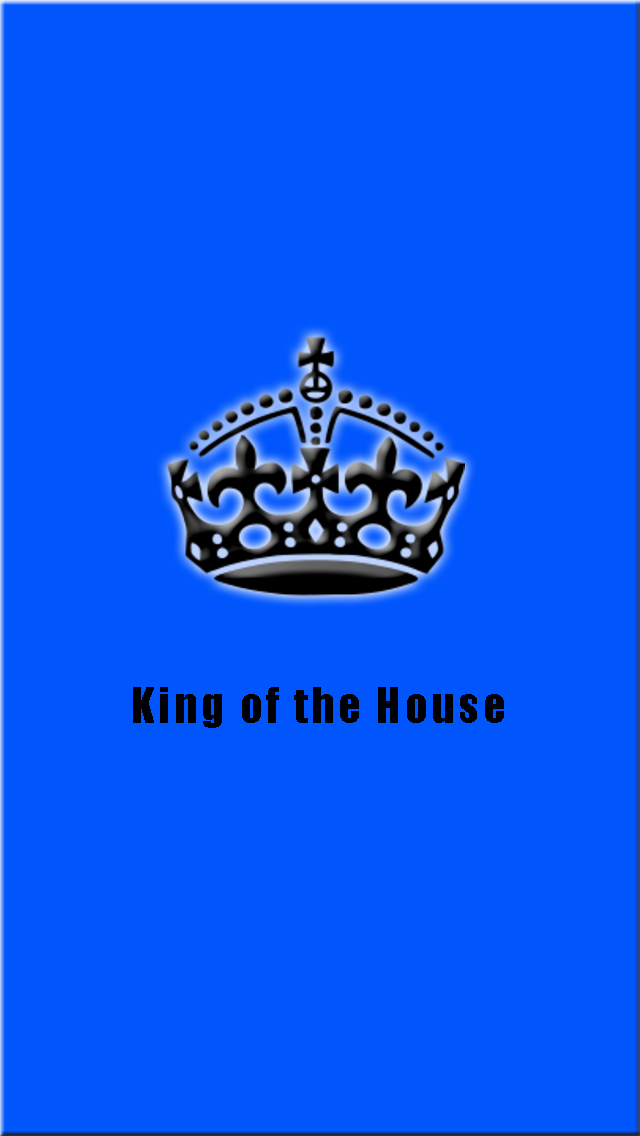
<style>
.page{position:relative;width:640px;height:1136px;background:#0055fc}
.page>*{position:absolute;margin:0}
.t1{font:45.3px "Impact";letter-spacing:0.075em;color:#000007}
</style>
<div class="page">
<p class="t1" style="left:133px;top:687px;width:371px;height:41px">King of the House</p>
</div>
